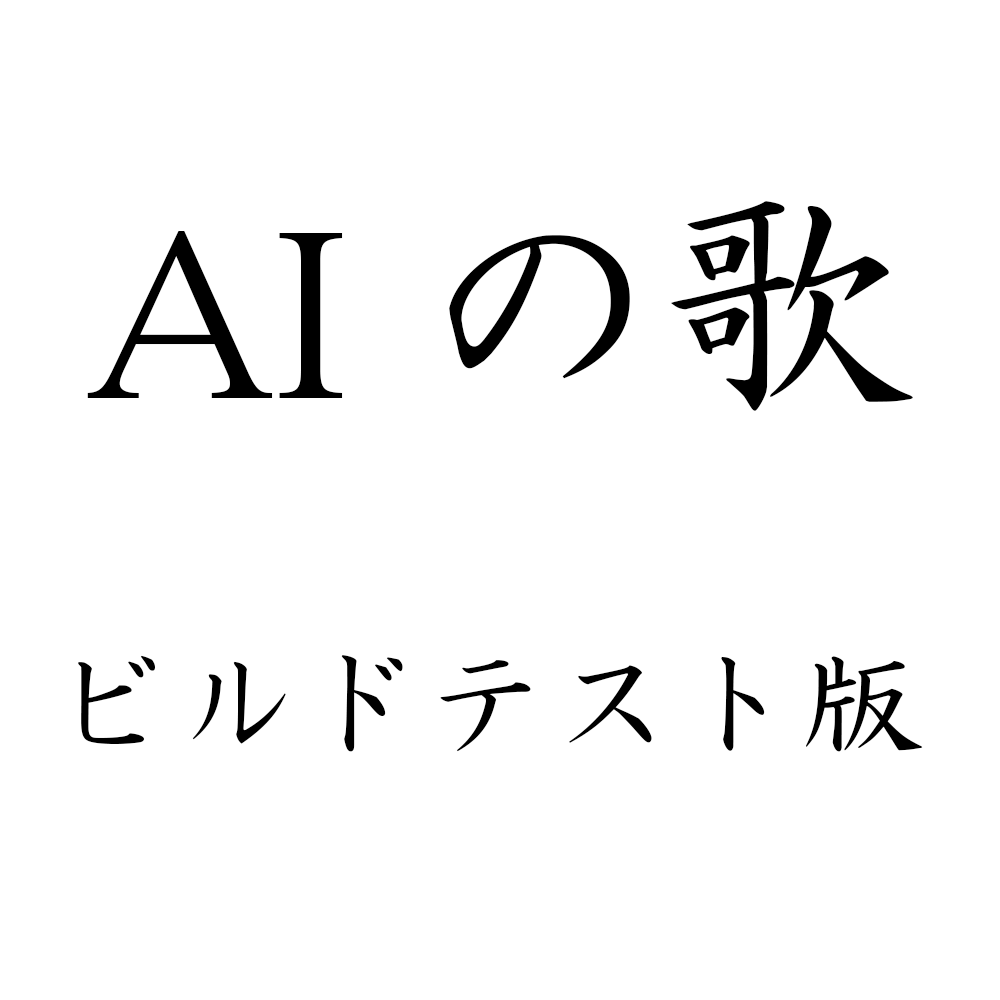
<style>
.page{position:relative;width:1000px;height:1000px;background:#ffffff}
.page>*{position:absolute;margin:0}
.t1{font:250px "RoNKSeiKaiStd-Lt";color:#000000}
.t2{font:125px "RoNKSeiKaiStd-Lt";color:#000000}
</style>
<div class="page">
<p class="t1" style="left:87px;top:201px;width:826px;height:210px">AIの歌</p>
<p class="t2" style="left:78px;top:655px;width:845px;height:97px">ビルドテスト版</p>
</div>
